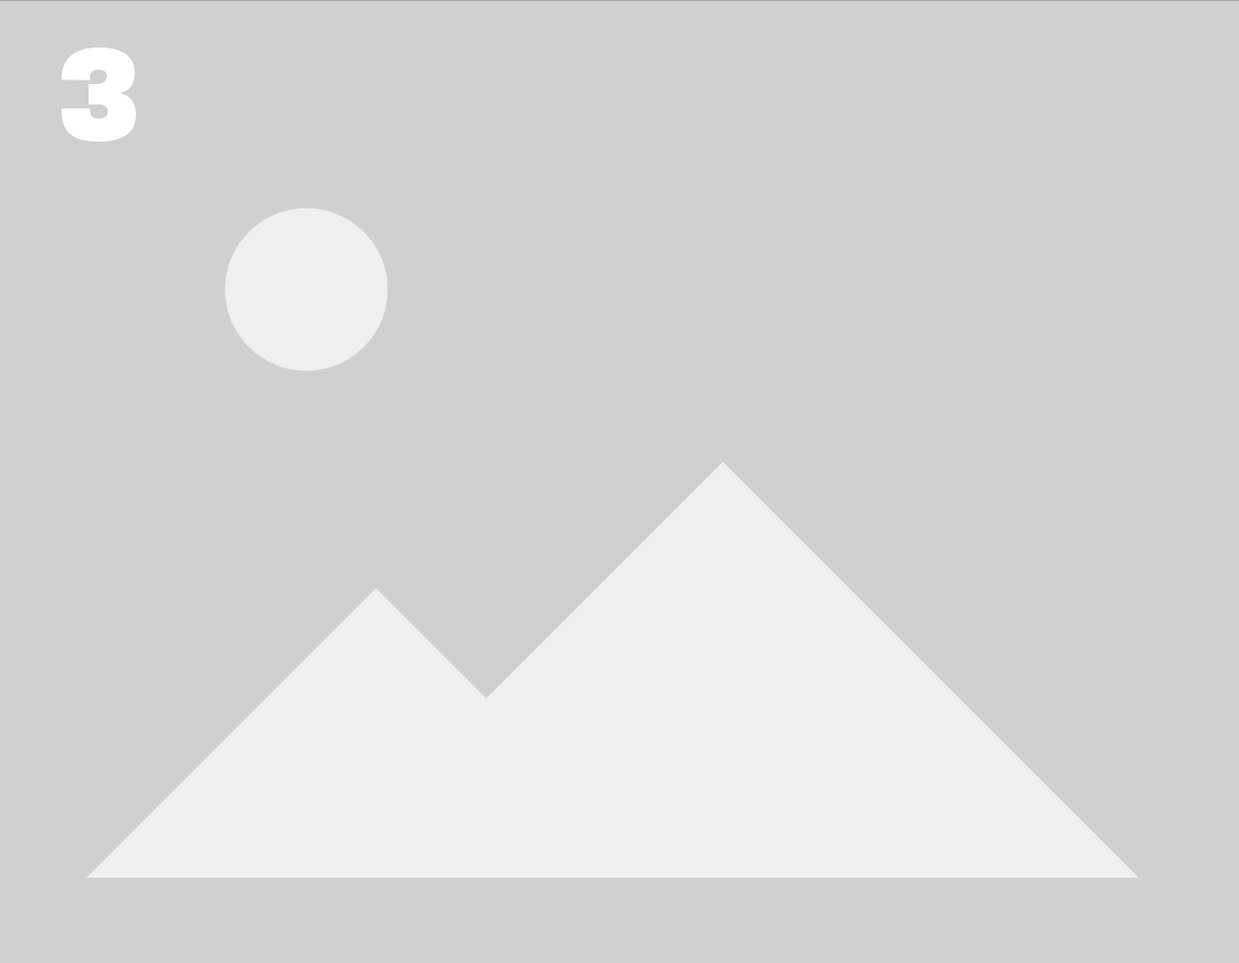
<style>
.page{position:relative;width:1239px;height:963px;background:#d0d0d0}
.page>*{position:absolute;margin:0}
.t1{font:129.7px "Alfarn2";color:#ffffff}
</style>
<div class="page">
<p class="t1" style="left:61px;top:47px;width:75px;height:95px">3</p>
</div>
